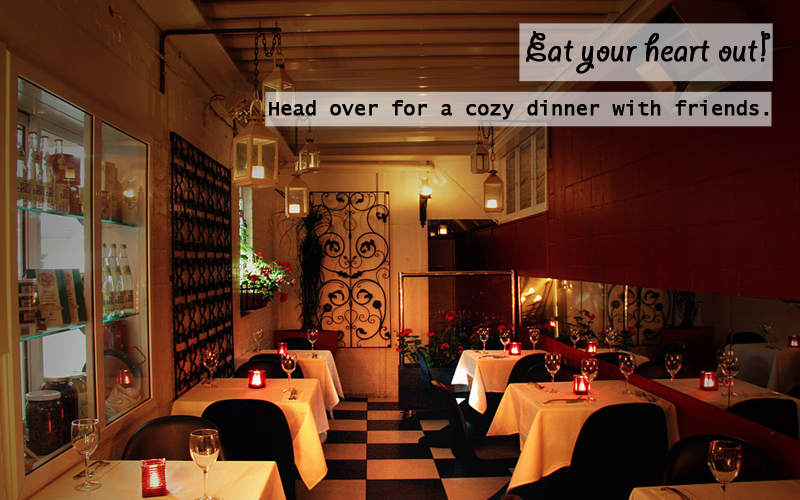
<style>
.page{position:relative;width:800px;height:500px}
.page>*{position:absolute;margin:0}
.t1{font:40.9px "GiddyupStd";color:#000000;font-weight:bold}
.t2{font:19.5px "LucidaConsole";color:#000000;font-weight:bold}
</style>
<div class="page">
<p class="t1" style="left:526px;top:31px;width:245px;height:43px">Eat your heart out!</p>
<p class="t2" style="left:269px;top:100px;width:500px;height:20px">Head over for a cozy dinner with friends.</p>
</div>
